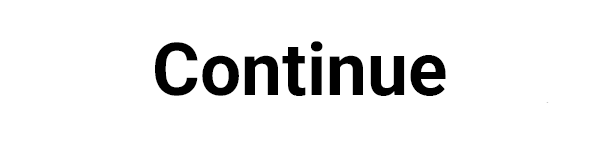
<style>
.page{position:relative;width:600px;height:150px;background:#ffffff}
.page>*{position:absolute;margin:0}
.t1{font:73px "Roboto-Bold";color:#000000}
</style>
<div class="page">
<p class="t1" style="left:155px;top:41px;width:291px;height:55px">Continue</p>
</div>
